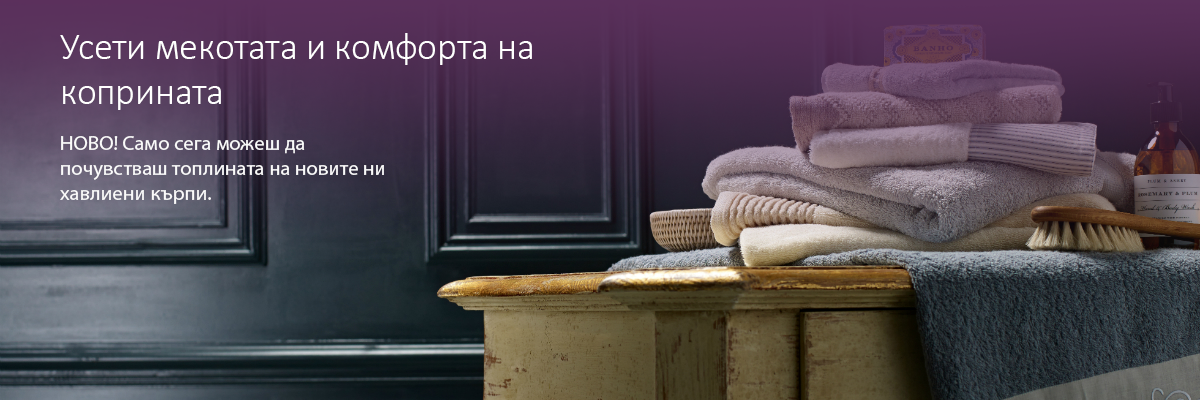
<style>
.page{position:relative;width:1200px;height:400px}
.page>*{position:absolute;margin:0}
.t1{font:37.5px "Calibri-Light";color:#ffffff}
.t2{font:20.9px "MyriadPro-Regular";color:#fafafa}
</style>
<div class="page">
<p class="t1" style="left:60px;top:33px;width:472px;height:77px">Усети мекотата и комфорта на коприната</p>
<p class="t2" style="left:60px;top:136px;width:324px;height:68px">НОВО! Само сега можеш да почувстваш топлината на новите ни хавлиени кърпи.</p>
</div>
